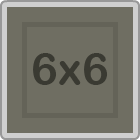
<style>
.page{position:relative;width:140px;height:140px;background:#6f6e62}
.page>*{position:absolute;margin:0}
.t1{font:44.6px "ArialRoundedMTBold";letter-spacing:0.005em;color:#3a3a32}
</style>
<div class="page">
<p class="t1" style="left:33px;top:53px;width:75px;height:32px">6x6</p>
</div>
